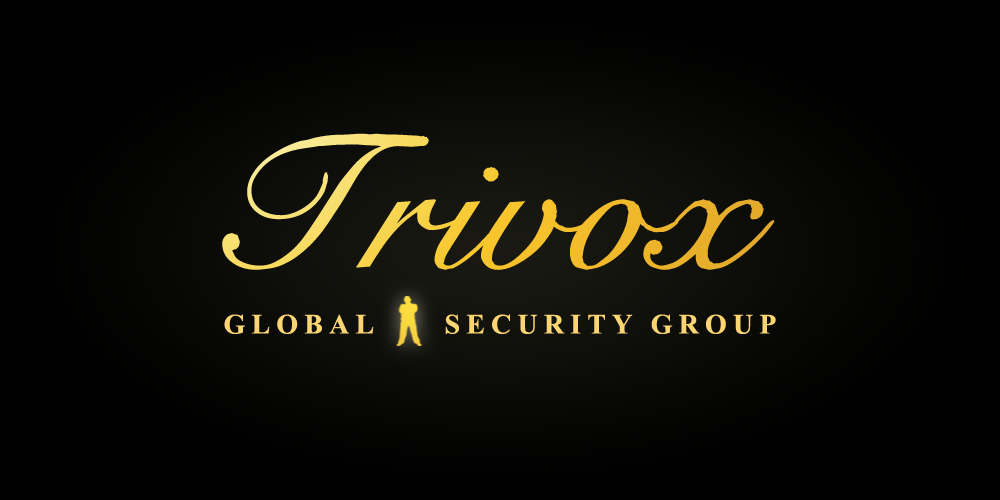
<style>
.page{position:relative;width:1000px;height:500px;background:#000000}
.page>*{position:absolute;margin:0}
.t1{font:180px "CygnetRound"}
.t2{font:180px "CygnetRound";letter-spacing:-0.02em}
.t3{font:28px "TimesNewRomanPS-BoldMT";letter-spacing:0.22em;color:#fbd571}
</style>
<div class="page">
<p class="t1" style="left:222px;top:133px;width:553px;height:137px">Trivo<span class="t2">x</span></p>
<p class="t3" style="left:224px;top:314px;width:552px;height:20px">GLOBAL     SECURITY GROUP</p>
</div>
